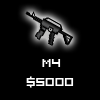
<style>
.page{position:relative;width:100px;height:100px;background:#000000}
.page>*{position:absolute;margin:0}
.t1{font:16px "VisitorTT1BRK";color:#ffffff}
</style>
<div class="page">
<p class="t1" style="left:42px;top:59px;width:19px;height:8px">M4</p>
<p class="t1" style="left:26px;top:76px;width:48px;height:12px">$5000</p>
</div>
